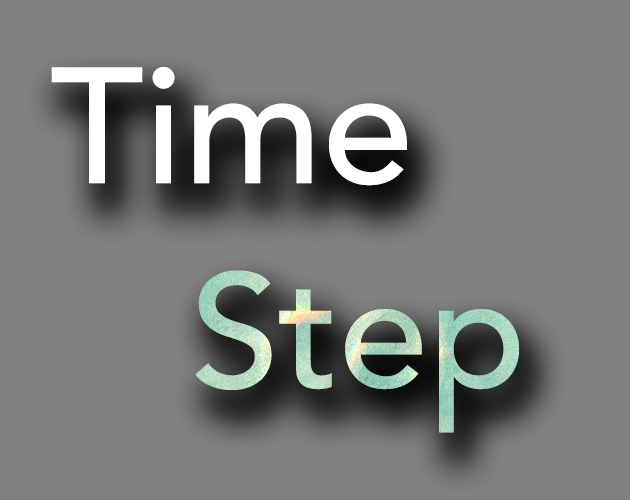
<style>
.page{position:relative;width:630px;height:500px;background:#818181}
.page>*{position:absolute;margin:0}
.t1{font:163.5px "Avenir-Medium";color:#ffffff}
.t2{font:160.5px "Avenir-Medium"}
</style>
<div class="page">
<p class="t1" style="left:51px;top:67px;width:356px;height:119px">Time</p>
<p class="t2" style="left:195px;top:270px;width:325px;height:163px">Step</p>
</div>
